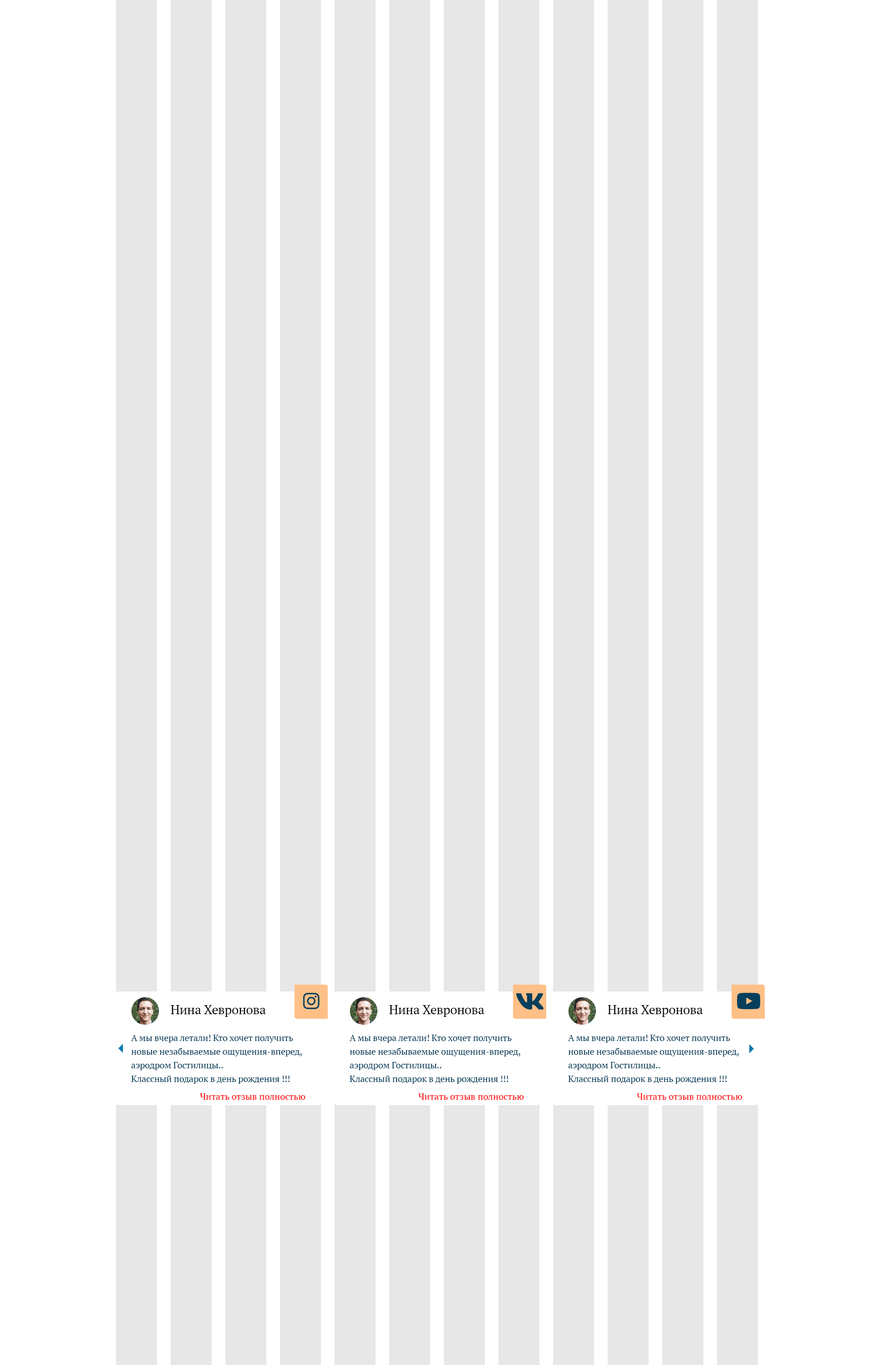
<style>
.page{position:relative;width:874px;height:1365px;background:#e7e7e8}
.page>*{position:absolute;margin:0}
.t1{font:12.7px "PTSerif-Regular";letter-spacing:-0.015em;color:#040404}
.t2{font:9.1px/13.6px "PTSerif-Regular";letter-spacing:-0.015em;color:#063f5c}
.t3{font:9.1px "PTSerif-Regular";color:#ff0000}
</style>
<div class="page">
<p class="t1" style="left:171px;top:1005px;width:95px;height:12px">Нина Хевронова</p>
<p class="t1" style="left:389px;top:1005px;width:95px;height:12px">Нина Хевронова</p>
<p class="t1" style="left:607px;top:1005px;width:96px;height:12px">Нина Хевронова</p>
<p class="t2" style="left:131px;top:1035px;width:171px;height:49px">А мы вчера летали! Кто хочет получить новые незабываемые ощущения-вперед, аэродром Гостилицы..<br>Классный подарок в день рождения !!!</p>
<p class="t2" style="left:349px;top:1035px;width:171px;height:49px">А мы вчера летали! Кто хочет получить новые незабываемые ощущения-вперед, аэродром Гостилицы..<br>Классный подарок в день рождения !!!</p>
<p class="t2" style="left:568px;top:1035px;width:170px;height:49px">А мы вчера летали! Кто хочет получить новые незабываемые ощущения-вперед, аэродром Гостилицы..<br>Классный подарок в день рождения !!!</p>
<p class="t3" style="left:200px;top:1093px;width:105px;height:7px">Читать отзыв полностью</p>
<p class="t3" style="left:418px;top:1093px;width:106px;height:7px">Читать отзыв полностью</p>
<p class="t3" style="left:637px;top:1093px;width:105px;height:7px">Читать отзыв полностью</p>
</div>
